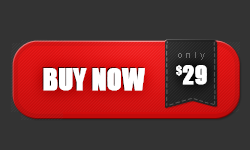
<style>
.page{position:relative;width:250px;height:150px;background:#333333}
.page>*{position:absolute;margin:0}
.t1{font:8px "ArialMT";letter-spacing:0.42em;color:#6d6d6d;scale:1.12 1}
.t2{font:24.1px "Impact";color:#ffffff;font-weight:bold;scale:0.95 1}
.t3{font:12.5px "Impact";color:#ffffff;scale:0.95 1}
.t4{font:27.8px "Impact";color:#ffffff;font-weight:bold;scale:0.95 1}
</style>
<div class="page">
<p class="t1" style="left:178px;top:52px;width:27px;height:8px">only</p>
<p class="t2" style="left:176px;top:65px;width:31px;height:20px"><span class="t3">$</span>29</p>
<p class="t4" style="left:43px;top:68px;width:102px;height:23px">BUY NOW</p>
</div>
